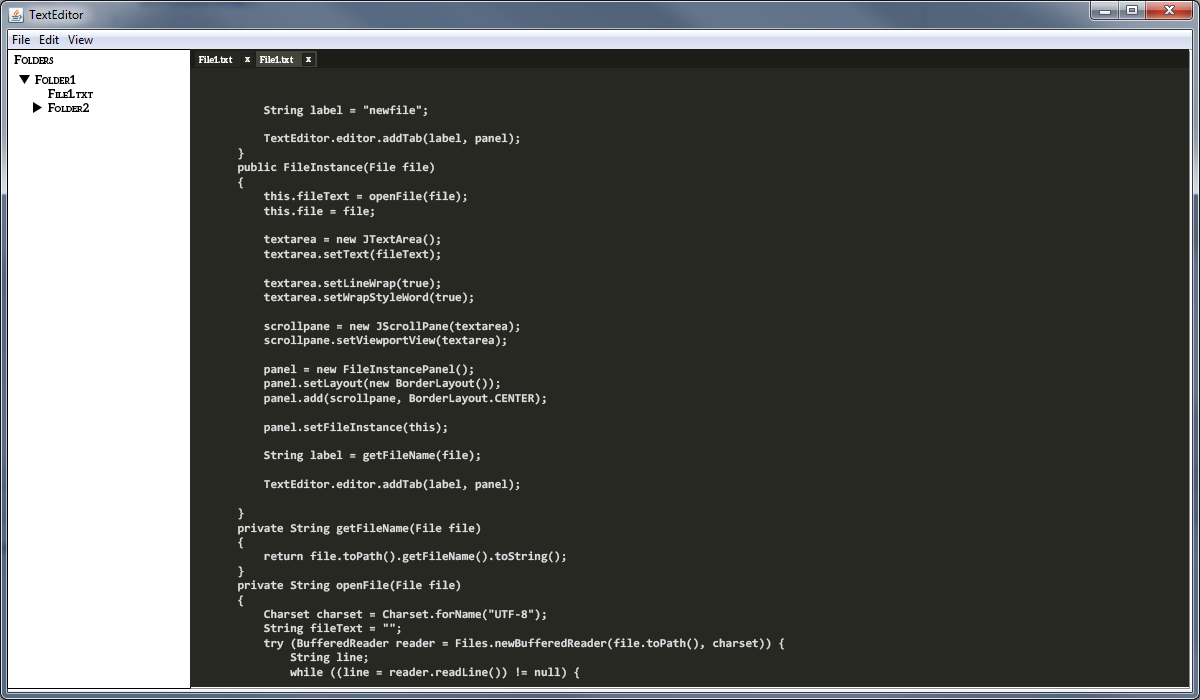
<style>
.page{position:relative;width:1200px;height:700px;background:#272822}
.page>*{position:absolute;margin:0}
.t1{font:12px "Aleo-Bold";color:#000000;font-variant:small-caps}
.t2{font:9px "Aleo-Bold";color:#fefefe}
.t3{font:11.5px "Aleo-Bold";color:#000000;font-variant:small-caps;scale:1.05 1}
.t4{font:11.8px "Aleo-Bold";color:#000000;font-variant:small-caps}
.t5{font:12px "Consolas-Bold";color:#dddddd}
</style>
<div class="page">
<p class="t1" style="left:14px;top:55px;width:40px;height:9px">Folders</p>
<p class="t2" style="left:198px;top:56px;width:35px;height:7px">File1.txt</p>
<p class="t2" style="left:245px;top:57px;width:5px;height:5px">x</p>
<p class="t2" style="left:259px;top:56px;width:35px;height:7px">File1.txt</p>
<p class="t2" style="left:306px;top:57px;width:5px;height:5px">x</p>
<p class="t1" style="left:35px;top:75px;width:41px;height:9px">Folder1</p>
<p class="t3" style="left:48px;top:89px;width:45px;height:9px">File1.txt</p>
<p class="t4" style="left:48px;top:103px;width:41px;height:9px">Folder2</p>
<p class="t5" style="left:238px;top:105px;width:546px;height:574px">String label = "newfile";<br><br>        TextEditor.editor.addTab(label, panel);<br>    }<br>    public FileInstance(File file)<br>    {<br>        this.fileText = openFile(file);<br>        this.file = file;<br><br>        textarea = new JTextArea();<br>        textarea.setText(fileText);<br><br>        textarea.setLineWrap(true);<br>        textarea.setWrapStyleWord(true);<br><br>        scrollpane = new JScrollPane(textarea);<br>        scrollpane.setViewportView(textarea);<br><br>        panel = new FileInstancePanel();<br>        panel.setLayout(new BorderLayout());<br>        panel.add(scrollpane, BorderLayout.CENTER);<br><br>        panel.setFileInstance(this);<br><br>        String label = getFileName(file);<br><br>        TextEditor.editor.addTab(label, panel);<br><br>    }<br>    private String getFileName(File file)<br>    {<br>        return file.toPath().getFileName().toString();<br>    }<br>    private String openFile(File file)<br>    {<br>        Charset charset = Charset.forName("UTF-8");<br>        String fileText = "";<br>        try (BufferedReader reader = Files.newBufferedReader(file.toPath(), charset)) {<br>            String line;<br>            while ((line = reader.readLine()) != null) {<br>                fileText += line + "\n";<br>            }<br>        } catch (IOException x) {<br>            System.err.format("IOException: %s%n", x);<br>        }<br>        return fileText;<br>    }<br>    public boolean saveFile(File file, String fileText) {<br>        Writer writer = null;<br>        try {<br>            writer = new BufferedWriter(new OutputStreamWriter(<br>                    new FileOutputStream(file.toString()), "utf-8"<br>            ));<br>        } catch (UnsupportedEncodingException e) {<br>            e.printStackTrace();<br>        } catch (FileNotFoundException e) {<br>            e.printStackTrace();<br>        }<br><br>        try {<br>            writer.write(fileText);<br>        } catch (IOException e) {<br>            e.printStackTrace();<br>        } finally {<br>            try {<br>                writer.close();<br>            } catch (IOException e) {<br>                e.printStackTrace();<br>            } finally {<br>                return true;<br>            }<br>        }<br>    }<br>    public static void main(String[] args)<br>    {<br><br>    }<br>}</p>
</div>
